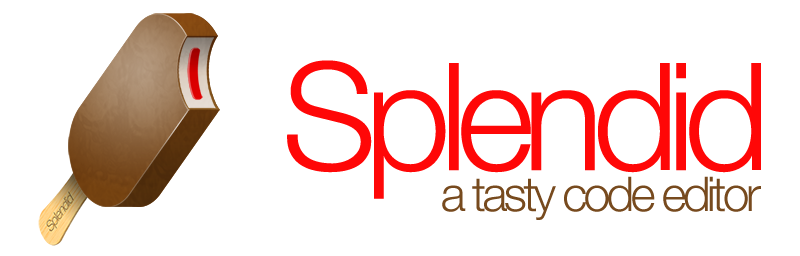
<style>
.page{position:relative;width:800px;height:256px;background:#ffffff}
.page>*{position:absolute;margin:0}
.t1{font:150px "HelveticaNeue-Light";letter-spacing:-0.075em;color:#ff0707}
.t2{font:48px "HelveticaNeue-Light";letter-spacing:-0.075em;color:#774a1e}
</style>
<div class="page">
<p class="t1" style="left:287px;top:60px;width:474px;height:139px">Splendid</p>
<p class="t2" style="left:442px;top:176px;width:319px;height:44px">a tasty code editor</p>
</div>
